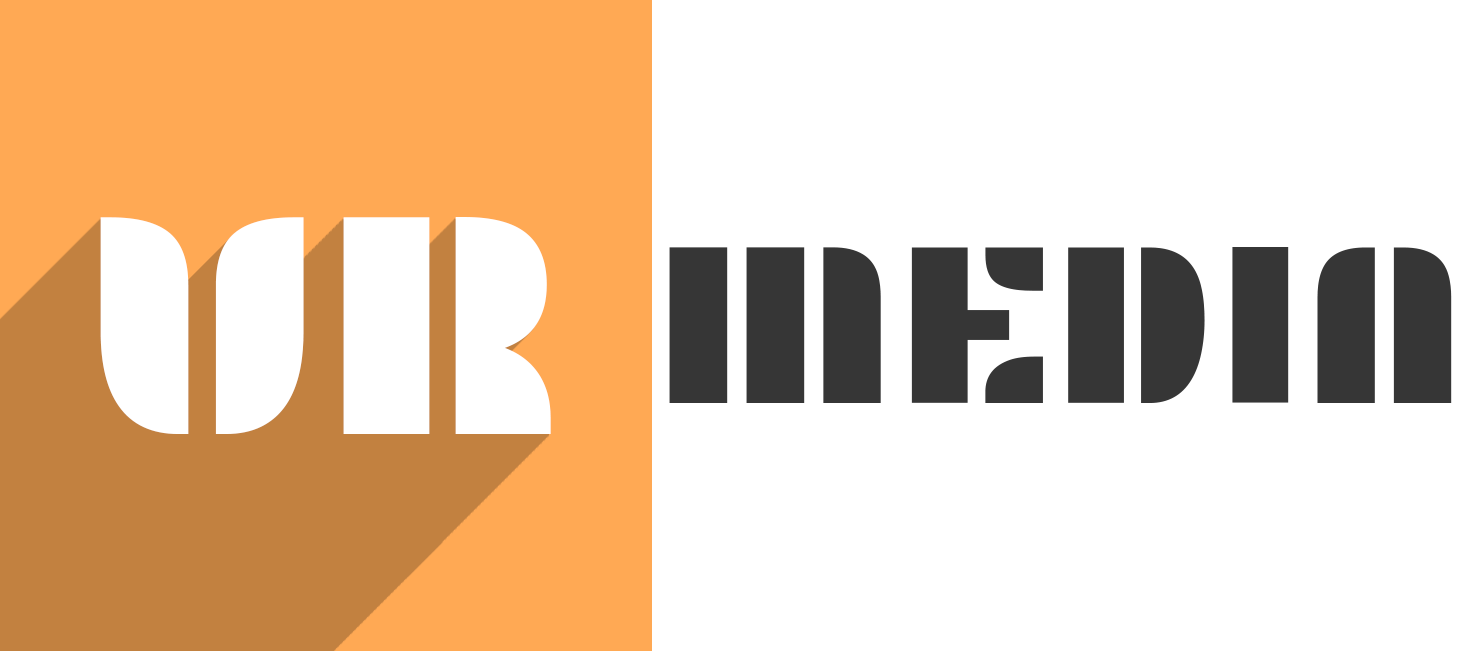
<style>
.page{position:relative;width:1463px;height:651px;background:#ffffff}
.page>*{position:absolute;margin:0}
.t1{font:326.4px "Plaster-Regular";color:#ffffff}
.t2{font:233.9px "Plaster-Regular";color:#363636;scale:0.91 1}
</style>
<div class="page">
<p class="t1" style="left:100px;top:217px;width:451px;height:217px">VR</p>
<p class="t2" style="left:669px;top:247px;width:783px;height:156px">MEDIA</p>
</div>
